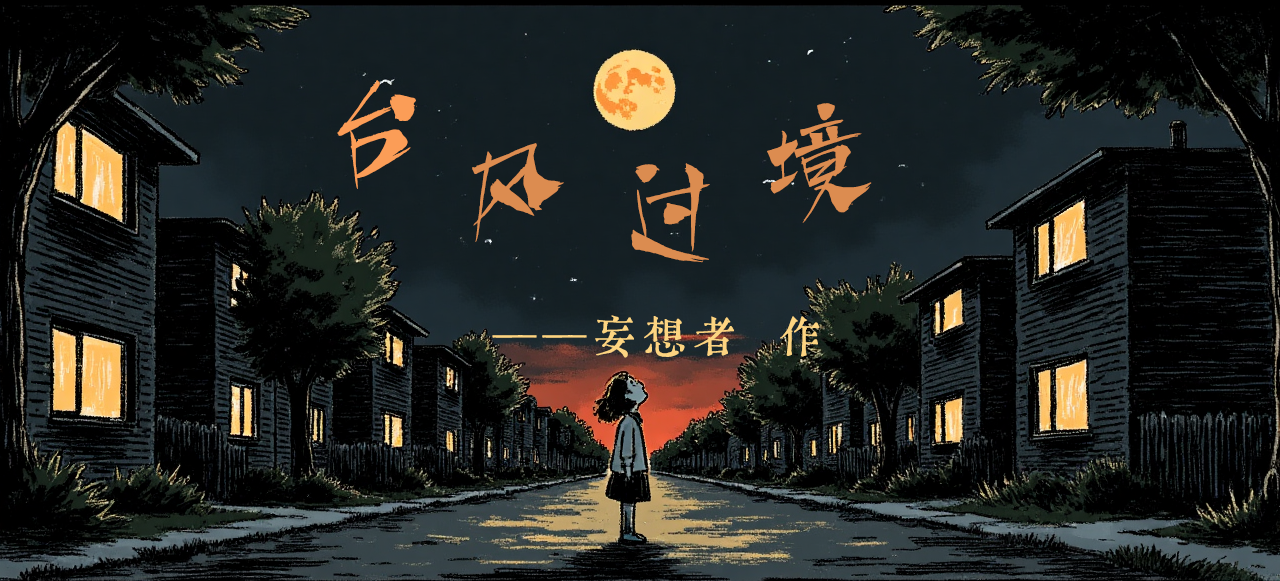
<style>
.page{position:relative;width:1280px;height:581px}
.page>*{position:absolute;margin:0}
.t1{font:120px "AaZLZ";letter-spacing:0.04em;color:#fb9d57}
.t2{font:120px "AaZLZ";letter-spacing:0.04em;color:#dc8c50}
.t3{font:120px "AaZLZ";letter-spacing:0.04em;color:#db8c50}
.t4{font:48px "youyou-yisong";letter-spacing:0.04em;color:#fcd481}
</style>
<div class="page">
<p class="t1" style="left:337px;top:80px;width:80px;height:109px">台</p>
<p class="t2" style="left:767px;top:103px;width:105px;height:120px">境</p>
<p class="t2" style="left:472px;top:143px;width:92px;height:99px">风</p>
<p class="t3" style="left:631px;top:163px;width:79px;height:100px">过</p>
<p class="t4" style="left:492px;top:315px;width:328px;height:43px">——妄想者  作</p>
</div>
